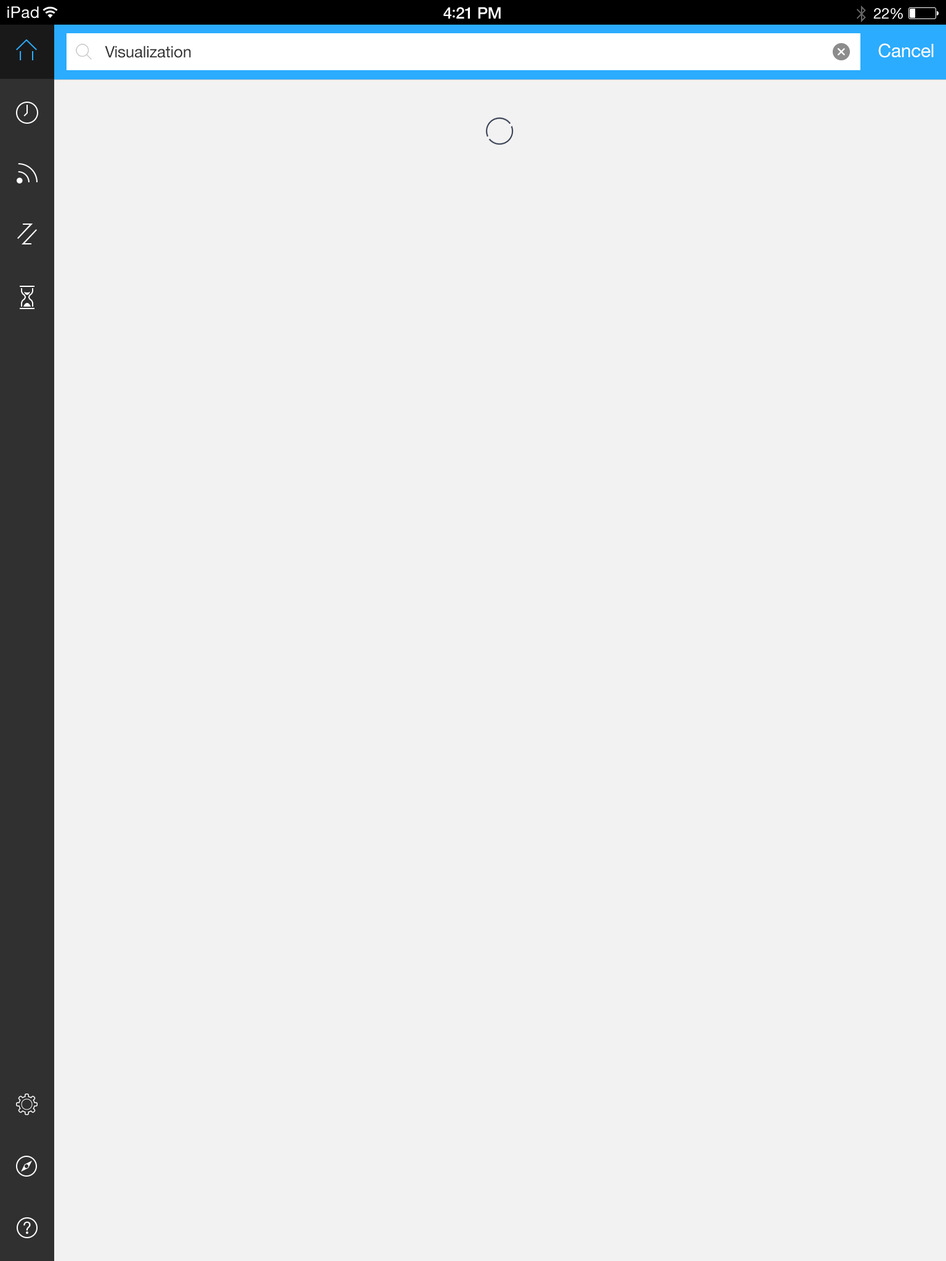
<style>
.page{position:relative;width:946px;height:1261px;background:#f2f2f2}
.page>*{position:absolute;margin:0}
.t1{font:16px "HelveticaNeue";letter-spacing:0.02em;color:#ffffff}
.t2{font:16px "HelveticaNeue-Medium";letter-spacing:-0.02em;color:#ffffff}
.t3{font:16px "Avenir-Medium";letter-spacing:-0.02em;color:#ffffff}
.t4{font:14.8px "HelveticaNeue";letter-spacing:-0.02em;color:#ffffff}
.t5{font:16px "HelveticaNeue";letter-spacing:-0.01em;color:#333333}
.t6{font:18.5px "HelveticaNeue";letter-spacing:-0.01em;color:#ffffff}
</style>
<div class="page">
<p class="t1" style="left:7px;top:6px;width:32px;height:12px">iPad</p>
<p class="t2" style="left:443px;top:7px;width:58px;height:12px">4<span class="t3">:</span>21 PM</p>
<p class="t4" style="left:873px;top:8px;width:30px;height:11px">22%</p>
<p class="t5" style="left:105px;top:46px;width:86px;height:12px">Visualization</p>
<p class="t6" style="left:878px;top:43px;width:55px;height:15px">Cancel</p>
</div>
